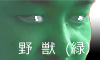
<style>
.page{position:relative;width:100px;height:60px}
.page>*{position:absolute;margin:0}
.t1{font:14px "MeiryoUI";color:#ffffff}
</style>
<div class="page">
<p class="t1" style="left:18px;top:41px;width:72px;height:16px">野　獣　(緑）</p>
</div>
